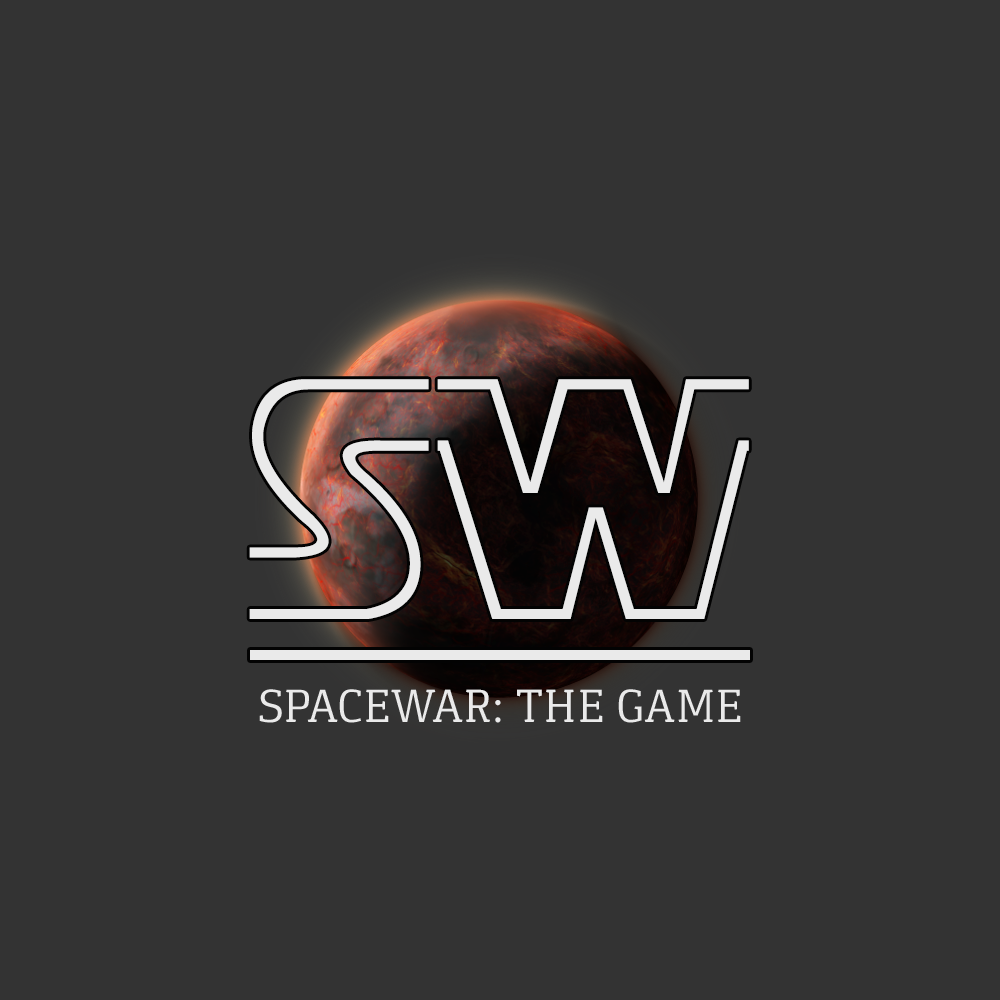
<style>
.page{position:relative;width:1000px;height:1000px;background:#333333}
.page>*{position:absolute;margin:0}
.t1{font:340px "StarJediHollow";color:#ebebeb}
.t2{font:48px "Gaspar";color:#eaeaea;text-transform:uppercase}
</style>
<div class="page">
<p class="t1" style="left:249px;top:379px;width:500px;height:240px">SW</p>
<p class="t2" style="left:259px;top:689px;width:482px;height:34px">Spacewar: the game</p>
</div>
